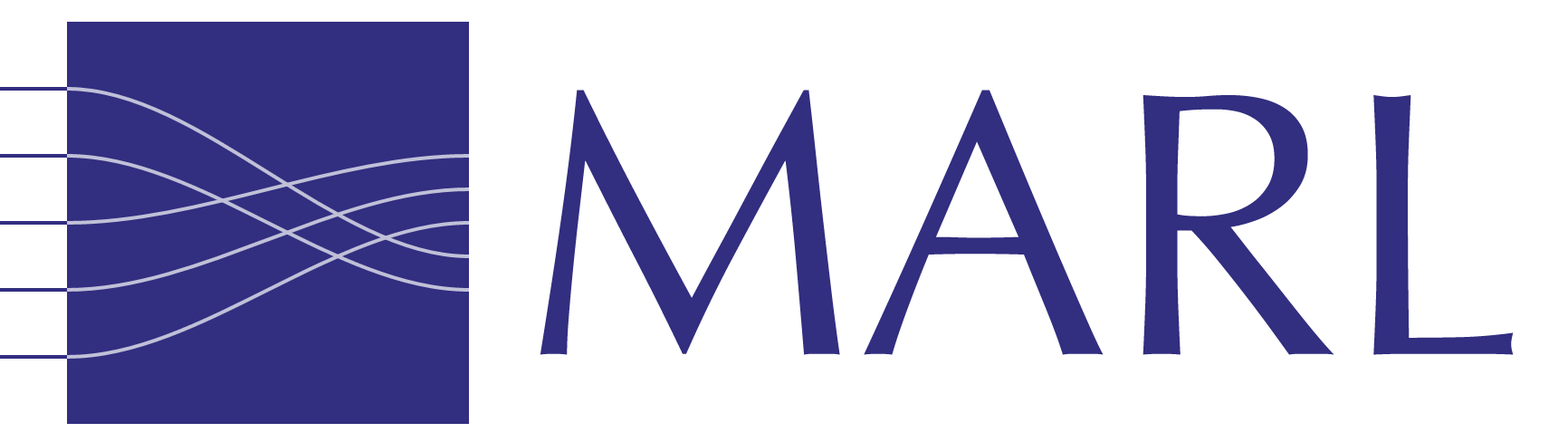
<style>
.page{position:relative;width:1568px;height:442px;background:#ffffff}
.page>*{position:absolute;margin:0}
.t1{font:377.2px "Optima-Regular";color:#322e80}
</style>
<div class="page">
<p class="t1" style="left:540px;top:90px;width:974px;height:265px">MARL</p>
</div>
